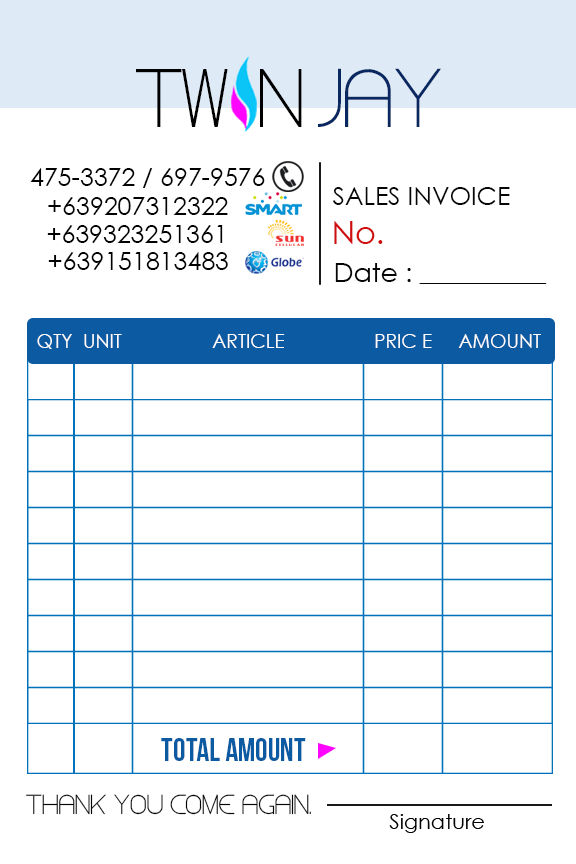
<style>
.page{position:relative;width:576px;height:864px;background:#ffffff}
.page>*{position:absolute;margin:0}
.t1{font:69.1px "Steiner";letter-spacing:-0.06em;color:#000000}
.t2{font:69.2px "Steiner";color:#092862}
.t3{font:25px "CenturyGothic";color:#000000}
.t4{font:25px "CenturyGothic";color:#060606}
.t5{font:31.6px "CenturyGothic";color:#d00e0e}
.t6{font:18px "CenturyGothic";color:#060606}
.t7{font:26.6px "CenturyGothic";color:#060606}
.t8{font:19px "CenturyGothic";color:#fdfdfd}
.t9{font:32px "BebasNeue";color:#0b5aa2}
.t10{font:23px "Steiner";color:#060606}
</style>
<div class="page">
<p class="t1" style="left:136px;top:69px;width:166px;height:58px">TW  N</p>
<p class="t2" style="left:318px;top:68px;width:123px;height:59px">JAY</p>
<p class="t3" style="left:30px;top:168px;width:235px;height:20px">475-3372 / 697-9576</p>
<p class="t3" style="left:48px;top:197px;width:180px;height:18px">+639207312322</p>
<p class="t4" style="left:333px;top:187px;width:177px;height:18px">SALES INVOICE</p>
<p class="t5" style="left:334px;top:221px;width:49px;height:23px">No.</p>
<p class="t3" style="left:47px;top:225px;width:176px;height:18px">+639323251361</p>
<p class="t3" style="left:48px;top:252px;width:180px;height:18px">+639151813483</p>
<p class="t6" style="left:335px;top:263px;width:212px;height:21px"><span class="t7">Date : </span>______________</p>
<p class="t8" style="left:37px;top:334px;width:504px;height:15px">QTY  UNIT        ARTICLE                 PRIC E     AMOUNT</p>
<p class="t9" style="left:161px;top:738px;width:145px;height:23px">Total Amount</p>
<p class="t10" style="left:26px;top:794px;width:285px;height:21px">THANK YOU COME AGAIN.</p>
</div>
